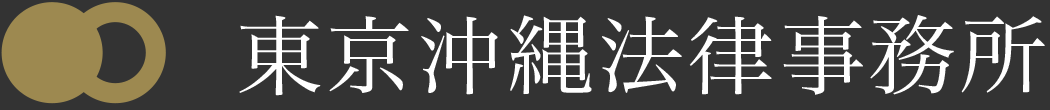
<style>
.page{position:relative;width:1050px;height:110px;background:#333333}
.page>*{position:absolute;margin:0}
.t1{font:86.1px "HiraMinProN-W3";letter-spacing:0.05em;color:#ffffff}
</style>
<div class="page">
<p class="t1" style="left:239px;top:15px;width:806px;height:81px">東京沖縄法律事務所</p>
</div>
